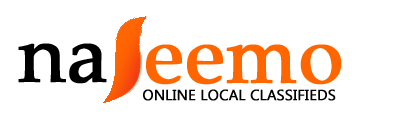
<style>
.page{position:relative;width:400px;height:120px;background:#ffffff}
.page>*{position:absolute;margin:0}
.t1{font:80px "PalatinoLinotype-Roman";color:#000000;font-weight:bold}
.t2{font:80px "PalatinoLinotype-Roman";color:#ff6600;font-weight:bold}
.t3{font:14.7px "LaoUI";color:#000000;font-weight:bold}
</style>
<div class="page">
<p class="t1" style="left:18px;top:43px;width:89px;height:41px">na</p>
<p class="t2" style="left:146px;top:44px;width:196px;height:41px">eemo</p>
<p class="t3" style="left:143px;top:89px;width:193px;height:12px">ONLINE LOCAL CLASSIFIEDS</p>
</div>
